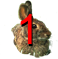
<style>
.page{position:relative;width:58px;height:59px;background:#ffffff}
.page>*{position:absolute;margin:0}
.t1{font:41.7px "ArialMT";color:#ff0101}
.t2{font:41.7px "ArialMT"}
</style>
<div class="page">
<p class="t1" style="left:20px;top:14px;width:12px;height:30px">1</p>
<p class="t2" style="left:21px;top:16px;width:12px;height:30px">1</p>
</div>
